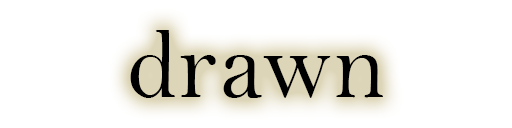
<style>
.page{position:relative;width:512px;height:128px;background:#ffffff}
.page>*{position:absolute;margin:0}
.t1{font:100px "BellMT";color:#000000}
</style>
<div class="page">
<p class="t1" style="left:130px;top:30px;width:253px;height:68px">drawn</p>
</div>
